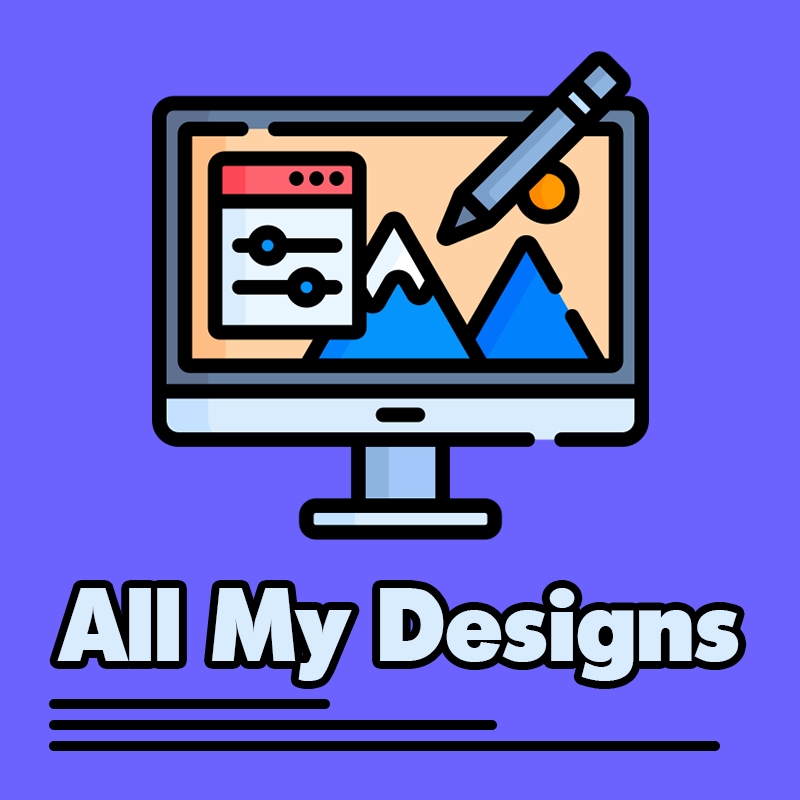
<style>
.page{position:relative;width:800px;height:800px;background:#6c63ff}
.page>*{position:absolute;margin:0}
.t1{font:100px "Montreal-Heavy";color:#d8ecfe}
</style>
<div class="page">
<p class="t1" style="left:57px;top:588px;width:682px;height:93px">All My Designs</p>
</div>
